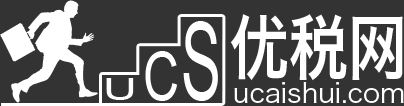
<style>
.page{position:relative;width:404px;height:106px;background:#333333}
.page>*{position:absolute;margin:0}
.t1{font:27px/60px "HiraginoSansGB-W3";color:#ffffff}
.t2{font:70.8px/57px "HiraginoSansGB-W6";color:#ffffff;scale:0.83 1}
.t3{font:30px "ArialMT";letter-spacing:0.14em;color:#ffffff;scale:1.57 1}
.t4{font:65.5px "ArialMT";letter-spacing:0.04em;color:#ffffff;scale:0.76 1}
.t5{font:107.5px "ArialMT";color:#ffffff;scale:0.55 1}
</style>
<div class="page">
<p class="t1" style="left:230px;top:14px;width:174px;height:89px;text-align:center"><span class="t2">优税网<br></span>ucaishui.com</p>
<p class="t3" style="left:106px;top:21px;width:112px;height:80px">U<span class="t4">C</span><span class="t5">S</span></p>
</div>
